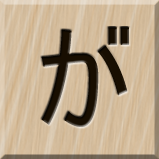
<style>
.page{position:relative;width:159px;height:159px}
.page>*{position:absolute;margin:0}
.t1{font:116px "MS-UIGothic";color:#180e01}
</style>
<div class="page">
<p class="t1" style="left:41px;top:27px;width:88px;height:100px">が</p>
</div>
